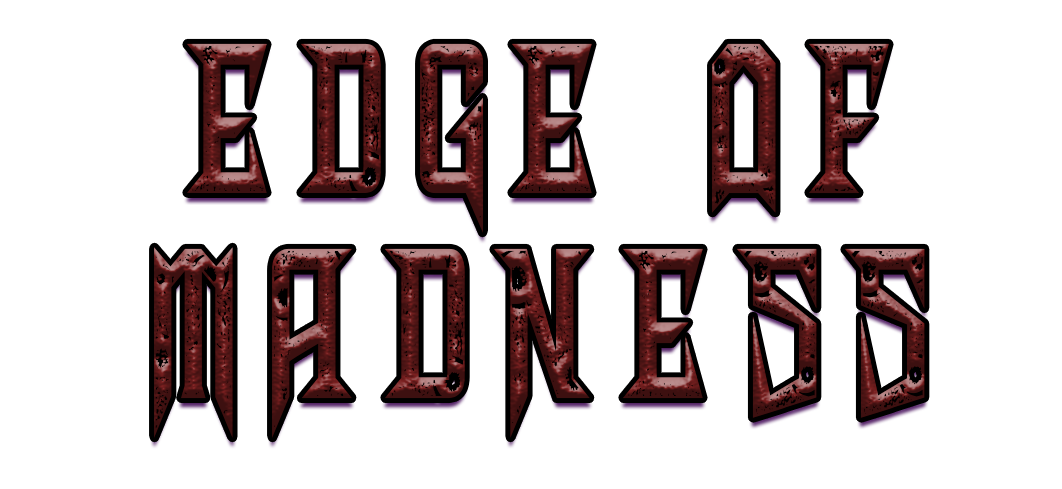
<style>
.page{position:relative;width:1062px;height:489px;background:#ffffff}
.page>*{position:absolute;margin:0}
.t1{font:250.8px/205px "ShadowsofSecurity";letter-spacing:0.14em;scale:0.83 1}
</style>
<div class="page">
<p class="t1" style="left:154px;top:43px;width:771px;height:395px;text-align:center">EDGE of <br>MaDNESS</p>
</div>
